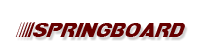
<style>
.page{position:relative;width:200px;height:55px;background:#ffffff}
.page>*{position:absolute;margin:0}
.t1{font:18px "BamfItalic";color:#660000}
</style>
<div class="page">
<p class="t1" style="left:15px;top:22px;width:170px;height:15px">Springboard</p>
</div>
